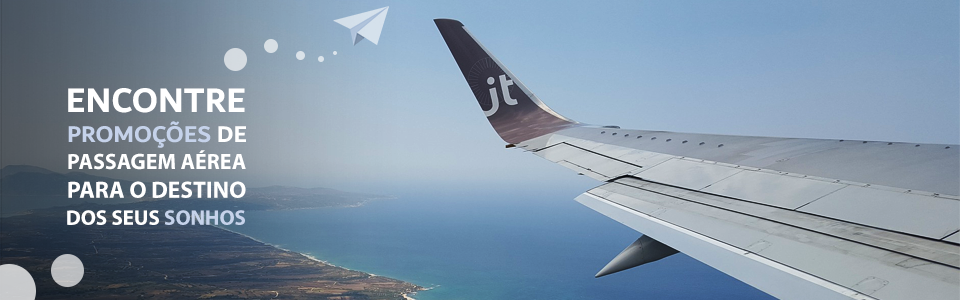
<style>
.page{position:relative;width:960px;height:300px}
.page>*{position:absolute;margin:0}
.t1{font:36.3px "Dubai-Bold";color:#ffffff}
.t2{font:24.2px "Dubai-Bold";color:#c5d2ea}
.t3{font:24.2px "Dubai-Bold";color:#ffffff}
.t4{font:22.4px "MyriadHebrew-Bold";color:#ffffff}
.t5{font:23.6px "MyriadHebrew-Bold";color:#ffffff}
.t6{font:21.2px "MyriadHebrew-Bold";color:#ffffff}
.t7{font:21.2px "MyriadHebrew-Bold";color:#c5d2ea}
</style>
<div class="page">
<p class="t1" style="left:68px;top:88px;width:177px;height:25px">ENCONTRE</p>
<p class="t2" style="left:68px;top:121px;width:178px;height:27px">PROMOÇÕES<span class="t3"> DE</span></p>
<p class="t4" style="left:68px;top:150px;width:178px;height:20px">PASSAGEM AÉREA</p>
<p class="t5" style="left:68px;top:181px;width:178px;height:17px">PARA O DESTINO</p>
<p class="t6" style="left:67px;top:210px;width:178px;height:15px">DOS SEUS <span class="t7">SONHOS</span></p>
</div>
